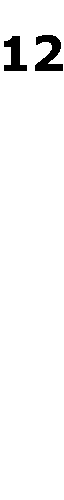
<style>
.page{position:relative;width:64px;height:500px;background:#ffffff}
.page>*{position:absolute;margin:0}
.t1{font:48px "Verdana-Bold";color:#000000}
</style>
<div class="page">
<p class="t1" style="left:4px;top:35px;width:59px;height:36px">12</p>
</div>
